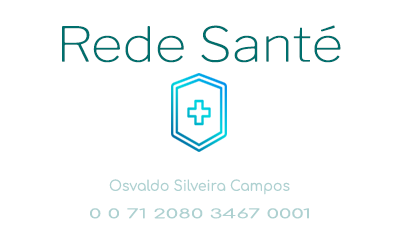
<style>
.page{position:relative;width:400px;height:250px;background:#ffffff}
.page>*{position:absolute;margin:0}
.t1{font:47.9px "LibreFranklin-Thin";color:#006f6d;scale:1.14 1}
.t2{font:14.4px "Comfortaa-Regular";color:#aed1d1}
.t3{font:12.7px "Comfortaa-Regular";color:#aed1d1;scale:1.7 1}
</style>
<div class="page">
<p class="t1" style="left:62px;top:25px;width:279px;height:38px">Rede Santé</p>
<p class="t2" style="left:109px;top:179px;width:181px;height:16px">Osvaldo Silveira Campos</p>
<p class="t3" style="left:90px;top:208px;width:219px;height:11px">0 0 71 2080 3467 0001</p>
</div>
